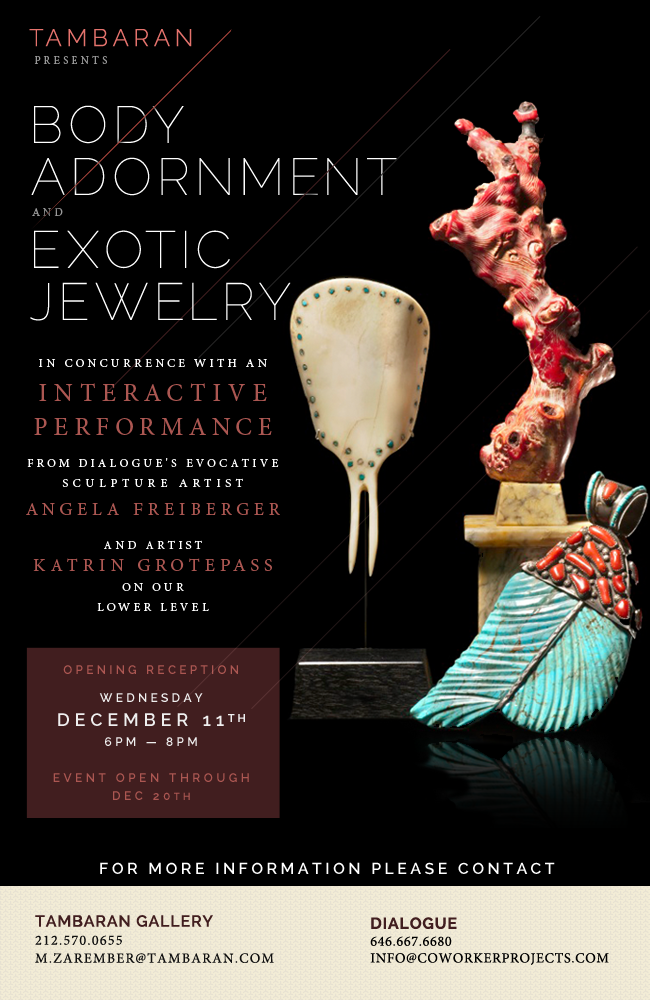
<style>
.page{position:relative;width:650px;height:1000px;background:#000000}
.page>*{position:absolute;margin:0}
.t1{font:24px "Raleway-Light";letter-spacing:0.19em;color:#e5736d}
.t2{font:11px "MinionPro-Regular";letter-spacing:0.27em;color:#999999;text-transform:uppercase}
.t3{font:51.8px/52.1px "Raleway-Thin";letter-spacing:0.1em;color:#ffffff;text-transform:uppercase}
.t4{font:12px/24.1px "MinionPro-Regular";letter-spacing:0.27em;color:#ffffff;text-transform:uppercase}
.t5{font:12px/20.1px "MinionPro-Regular";letter-spacing:0.27em;color:#ffffff;text-transform:uppercase}
.t6{font:25px/34.1px "MinionPro-Regular";letter-spacing:0.27em;color:#ac5752;text-transform:uppercase}
.t7{font:12px/24.1px "MinionPro-Regular";letter-spacing:0.27em;color:#ac5752;text-transform:uppercase}
.t8{font:12px/8.1px "MinionPro-Regular";letter-spacing:0.27em;color:#ffffff;text-transform:uppercase}
.t9{font:12px/20.1px "MinionPro-Regular";letter-spacing:0.39em;color:#ffffff;text-transform:uppercase}
.t10{font:18px/28.1px "MinionPro-Regular";letter-spacing:0.27em;color:#ac5752;text-transform:uppercase}
.t11{font:12px/34.1px "MinionPro-Regular";letter-spacing:0.27em;color:#ffffff;text-transform:uppercase}
.t12{font:18px "MinionPro-Regular";letter-spacing:0.27em;color:#ac5752;text-transform:uppercase}
.t13{font:12px/18px "Raleway-SemiBold";letter-spacing:0.29em;color:#ac5752;text-transform:uppercase}
.t14{font:12px/28px "Raleway-SemiBold";letter-spacing:0.27em;color:#ac5752;text-transform:uppercase}
.t15{font:12px/28px "Raleway-SemiBold";letter-spacing:0.27em;color:#efefef;text-transform:uppercase}
.t16{font:18px/24px "Raleway-SemiBold";letter-spacing:0.27em;color:#efefef;text-transform:uppercase}
.t17{font:11px/24px "Raleway-Bold";letter-spacing:0.27em;color:#efefef;text-transform:uppercase}
.t18{font:12px/20px "Raleway-SemiBold";letter-spacing:0.27em;color:#efefef;text-transform:uppercase}
.t19{font:10px/18px "Raleway-SemiBold";letter-spacing:0.29em;color:#ac5752;text-transform:uppercase}
.t20{font:16px "Raleway-SemiBold";letter-spacing:0.21em;color:#ffffff;text-transform:uppercase}
.t21{font:14px/18px "MinionPro-Regular";letter-spacing:0.09em;color:#101010;text-transform:uppercase}
.t22{font:16px/18px "Raleway-SemiBold";letter-spacing:0.05em;color:#411e1f;text-transform:uppercase}
.t23{font:14px "MinionPro-Regular";letter-spacing:0.05em;color:#000000;text-transform:uppercase}
.t24{font:16px "Raleway-Bold";letter-spacing:0.05em;color:#411e1f;text-transform:uppercase}
</style>
<div class="page">
<p class="t1" style="left:29px;top:29px;width:163px;height:18px">TAMBARAN</p>
<p class="t2" style="left:34px;top:55px;width:73px;height:9px">PRESENTS</p>
<p class="t3" style="left:31px;top:105px;width:366px;height:91px">BODY ADORNMENT</p>
<p class="t2" style="left:32px;top:208px;width:31px;height:8px">AND</p>
<p class="t3" style="left:30px;top:230px;width:261px;height:91px">EXOTIC JEWELRY</p>
<p class="t4" style="left:26px;top:358px;width:254px;height:253px;text-align:center"><span class="t5">in Concurrence with an<br></span><span class="t6">Interactive <br>Performance</span><span class="t7"> <br></span><span class="t8"><br></span>from Dialogue's evocative <span class="t9">sculpture artist<br></span><span class="t10">Angela Freiberger<br></span><span class="t11">and artist</span><span class="t5"> <br></span><span class="t12">Katrin Grotepass <br></span><span class="t5">on our <br>Lower Level</span></p>
<p class="t13" style="left:53px;top:665px;width:196px;height:135px;text-align:center"><span class="t14">opening reception<br></span><span class="t15">WednesdaY <br></span><span class="t16">December 11</span><span class="t17">th<br></span><span class="t18">6pm — 8pm<br><br></span>EvENT OPEN THROUGH <br>DEC 20<span class="t19">TH</span></p>
<p class="t20" style="left:100px;top:862px;width:455px;height:13px">For More Information Please Contact</p>
<p class="t21" style="left:35px;top:915px;width:239px;height:48px"><span class="t22">Tambaran Gallery<br></span>212.570.0655<br>m.zarember@tambaran.com</p>
<p class="t23" style="left:370px;top:917px;width:239px;height:48px"><span class="t24">Dialogue<br></span>646.667.6680<br>info@coworkerprojects.com</p>
</div>
